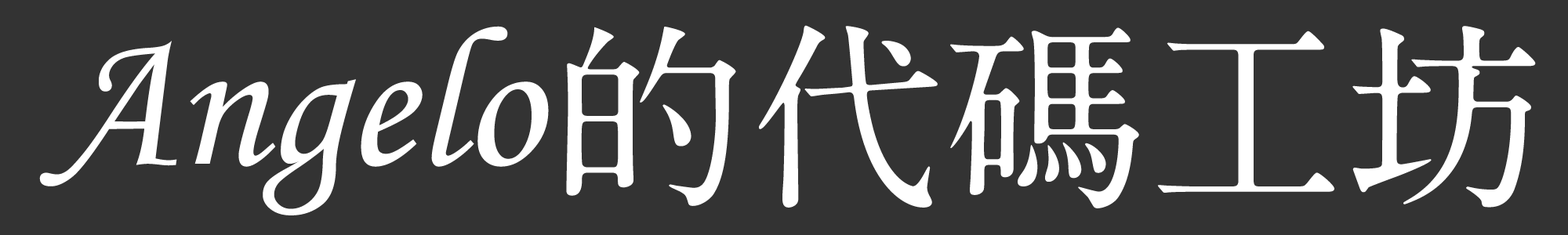
<style>
.page{position:relative;width:1568px;height:235px;background:#333333}
.page>*{position:absolute;margin:0}
.t1{font:199.4px "STLiti";color:#ffffff}
.t2{font:199.4px "A1MinchoStd-Bold";color:#ffffff}
</style>
<div class="page">
<p class="t1" style="left:39px;top:26px;width:510px;height:190px">Angelo</p>
<p class="t2" style="left:566px;top:25px;width:970px;height:184px">的代碼工坊</p>
</div>
